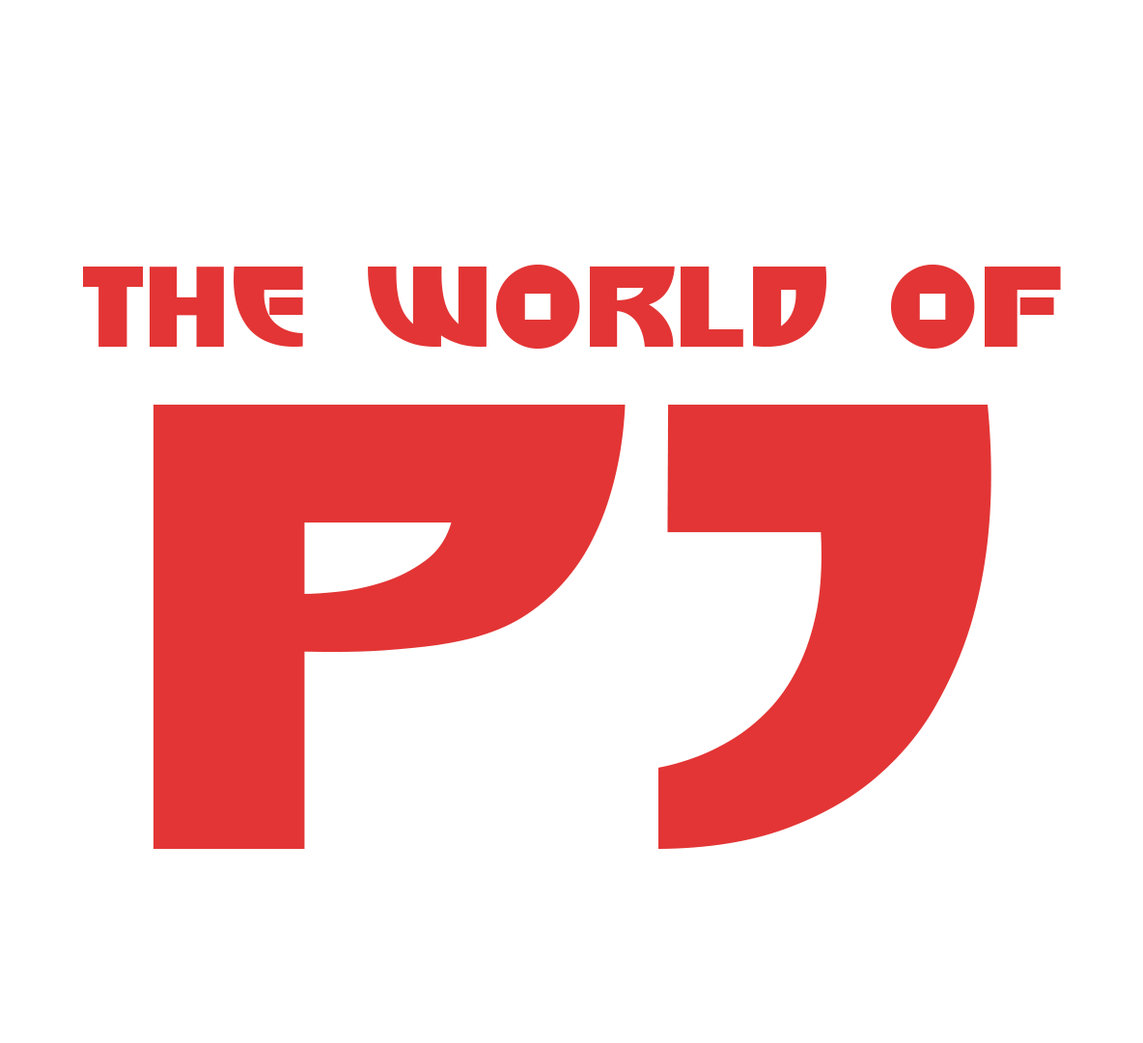
<style>
.page{position:relative;width:1143px;height:1043px;background:#ffffff}
.page>*{position:absolute;margin:0}
.t1{font:109.1px "BigHero";color:#e33535}
.t2{font:606.4px "BigHero";color:#e33535}
</style>
<div class="page">
<p class="t1" style="left:83px;top:265px;width:978px;height:84px">the world of</p>
<p class="t2" style="left:153px;top:405px;width:839px;height:444px">pj</p>
</div>
